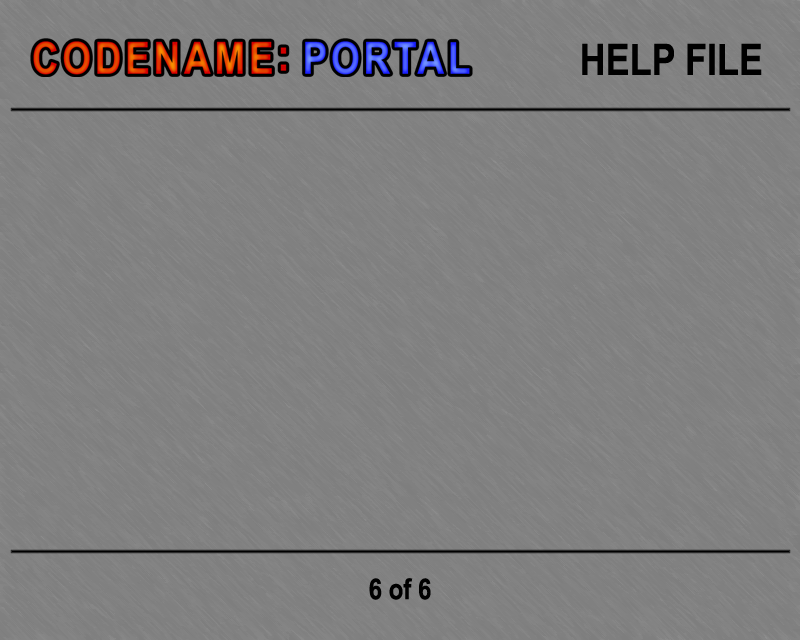
<style>
.page{position:relative;width:800px;height:640px;background:#808080}
.page>*{position:absolute;margin:0}
.t1{font:43.2px "Arial-BoldMT";color:#000000;scale:0.83 1}
.t2{font:28.8px "Arial-BoldMT";color:#000000;scale:0.83 1}
</style>
<div class="page">
<p class="t1" style="left:582px;top:43px;width:180px;height:32px">HELP FILE</p>
<p class="t2" style="left:369px;top:578px;width:62px;height:22px">6 of 6</p>
</div>
